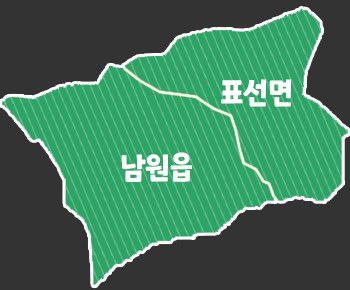
<style>
.page{position:relative;width:350px;height:290px;background:#333333}
.page>*{position:absolute;margin:0}
.t1{font:30.5px "ONEMobilePOPRegular";color:#ffffff;scale:0.93 1}
</style>
<div class="page">
<p class="t1" style="left:221px;top:79px;width:70px;height:28px">표선면</p>
<p class="t1" style="left:121px;top:152px;width:71px;height:30px">남원읍</p>
</div>
